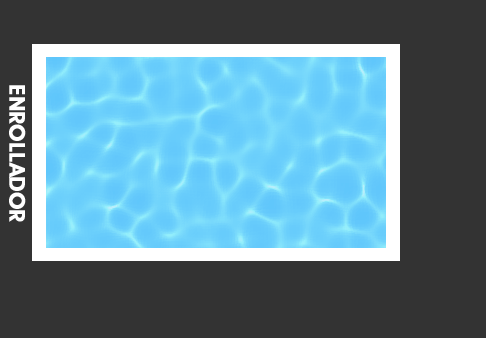
<style>
.page{position:relative;width:486px;height:338px;background:#333333}
.page>*{position:absolute;margin:0}
.t1{font:21.7px "AvantGardeITCbyBT-Demi";color:#ffffff;font-weight:bold}
</style>
<div class="page">
<p class="t1" style="left:9px;top:85px;width:17px;height:137px;rotate:90deg">ENROLLADOR</p>
</div>
